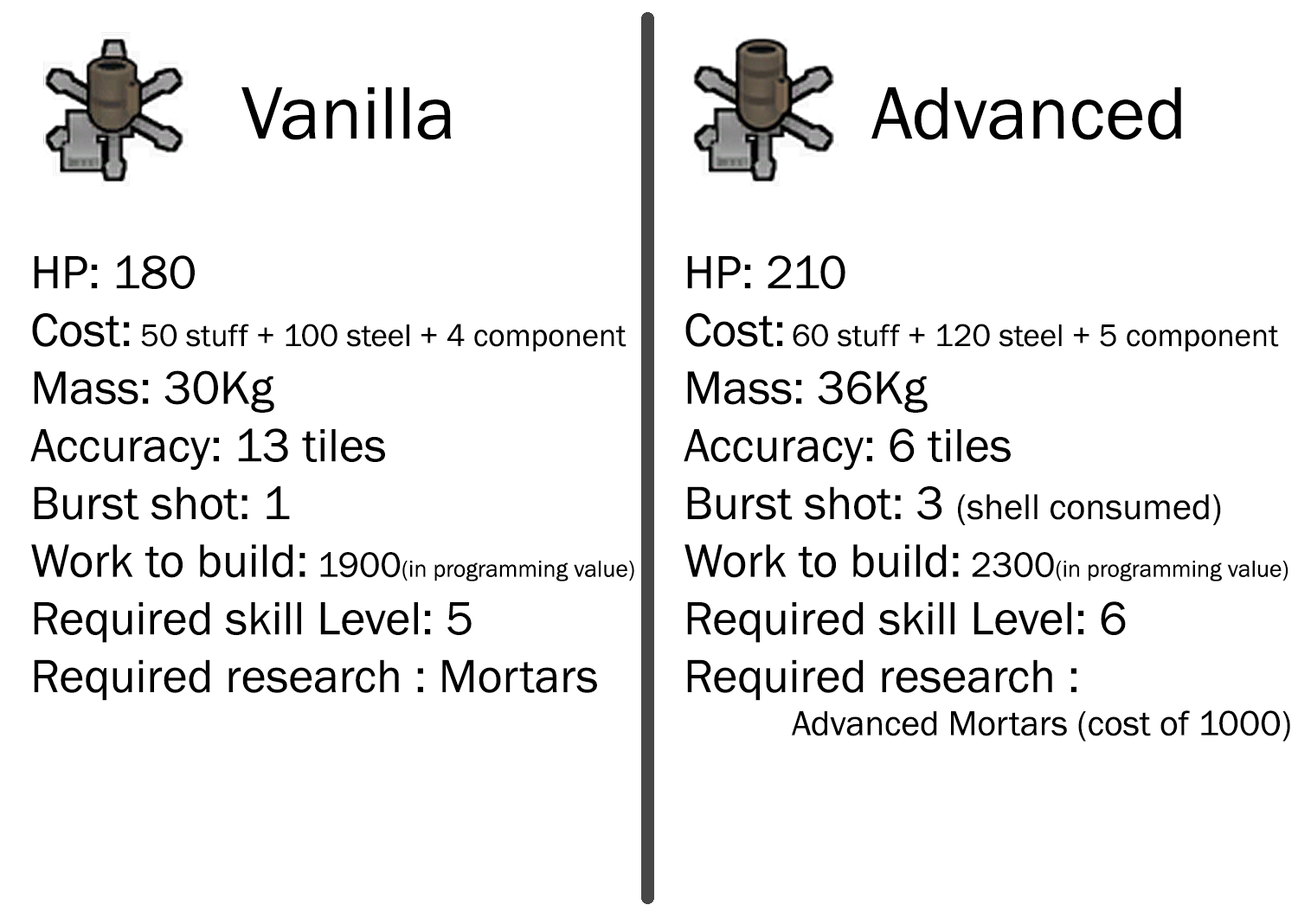
<style>
.page{position:relative;width:1298px;height:918px;background:#ffffff}
.page>*{position:absolute;margin:0}
.t1{font:76.9px "FranklinGothic-Book";color:#000000}
.t2{font:48.1px "FranklinGothic-Book";color:#000000}
.t3{font:32.1px "FranklinGothic-Book";color:#000000}
.t4{font:36.1px "FranklinGothic-Book";color:#000000}
.t5{font:24px "FranklinGothic-Book";color:#000000}
.t6{font:36.8px "FranklinGothic-Book";color:#000000}
.t7{font:36px "FranklinGothic-Book";color:#000000}
</style>
<div class="page">
<p class="t1" style="left:242px;top:87px;width:210px;height:53px">Vanilla</p>
<p class="t1" style="left:872px;top:87px;width:310px;height:53px">Advanced</p>
<p class="t2" style="left:30px;top:255px;width:604px;height:446px">HP: 180<br>Cost: <span class="t3">50 stuff + 100 steel + 4 component<br></span>Mass: 30Kg<br>Accuracy: 13 tiles<br>Burst shot: 1<br>Work to build:<span class="t4"> 1900</span><span class="t5">(in programming value)<br></span>Required skill Level: 5<br>Required research : Mortars</p>
<p class="t2" style="left:684px;top:255px;width:607px;height:487px">HP: 210<br>Cost: <span class="t3">60 stuff + 120 steel + 5 component <br></span>Mass: 36Kg<br>Accuracy: 6 tiles<br>Burst shot: 3 <span class="t6">(shell consumed)<br></span>Work to build:<span class="t4"> 2300</span><span class="t5">(in programming value)<br></span>Required skill Level: 6<br>Required research : <br><span class="t7">            Advanced Mortars (cost of 1000)</span></p>
</div>
